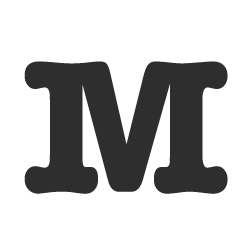
<style>
.page{position:relative;width:250px;height:250px;background:#ffffff}
.page>*{position:absolute;margin:0}
.t1{font:195.3px "AmericanTypewriter-Bold";color:#2e2e2e}
</style>
<div class="page">
<p class="t1" style="left:24px;top:61px;width:204px;height:133px">M</p>
</div>
